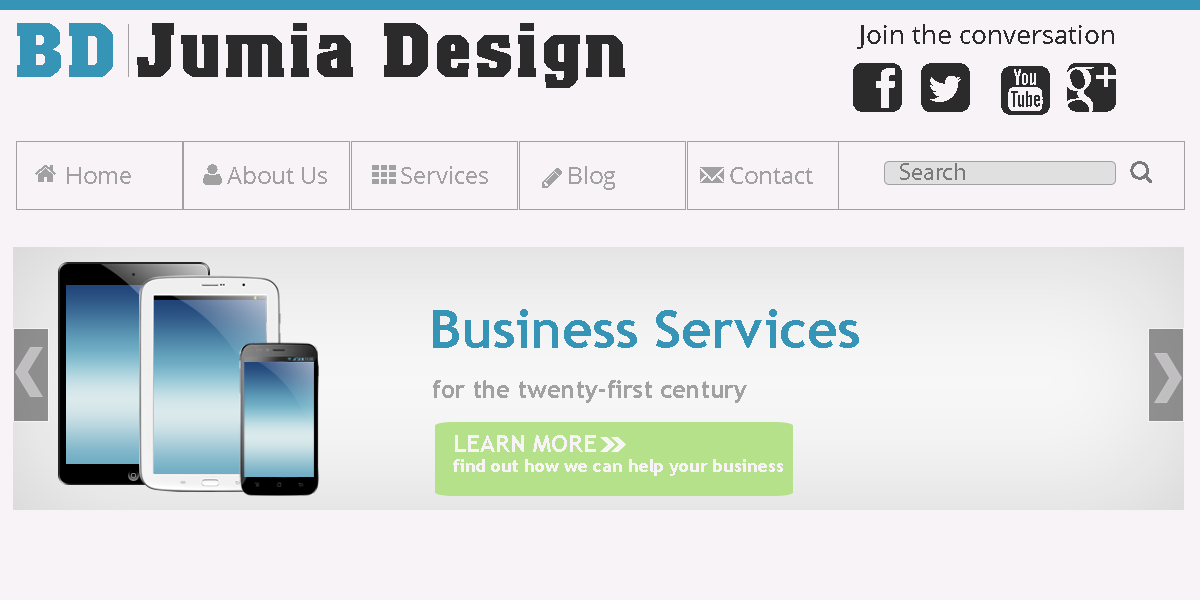
<style>
.page{position:relative;width:1200px;height:600px;background:#f7f3f7}
.page>*{position:absolute;margin:0}
.t1{font:76px "Colossalis-Bold";letter-spacing:0.04em;color:#3694b7}
.t2{font:76px "Colossalis-Bold";letter-spacing:0.04em;color:#2b2b2b}
.t3{font:26px "OpenSans";color:#2b2b2b}
.t4{font:24px "OpenSans";color:#a1a1a1}
.t5{font:24px "MyriadPro-Regular";color:#7a7a7a}
.t6{font:53px "TrebuchetMS-Bold";color:#3694b7}
.t7{font:24px "TrebuchetMS-Bold";color:#a1a1a1}
.t8{font:24px "TrebuchetMS-Bold";color:#f7f3f7}
.t9{font:18px "TrebuchetMS-Bold";color:#f7f3f7}
</style>
<div class="page">
<p class="t1" style="left:17px;top:23px;width:96px;height:54px">BD</p>
<p class="t2" style="left:137px;top:23px;width:488px;height:65px">Jumia Design</p>
<p class="t3" style="left:857px;top:24px;width:257px;height:25px">Join the conversation</p>
<p class="t4" style="left:67px;top:167px;width:64px;height:17px">Home</p>
<p class="t4" style="left:227px;top:166px;width:100px;height:18px">About Us</p>
<p class="t4" style="left:401px;top:166px;width:87px;height:18px">Services</p>
<p class="t4" style="left:569px;top:166px;width:46px;height:24px">Blog</p>
<p class="t4" style="left:730px;top:167px;width:83px;height:17px">Contact</p>
<p class="t5" style="left:900px;top:163px;width:65px;height:17px">Search</p>
<p class="t6" style="left:433px;top:309px;width:426px;height:39px">Business Services</p>
<p class="t7" style="left:433px;top:380px;width:314px;height:23px">for the twenty-first century</p>
<p class="t8" style="left:455px;top:435px;width:141px;height:17px">LEARN MORE</p>
<p class="t9" style="left:453px;top:459px;width:330px;height:17px">find out how we can help your business</p>
</div>
